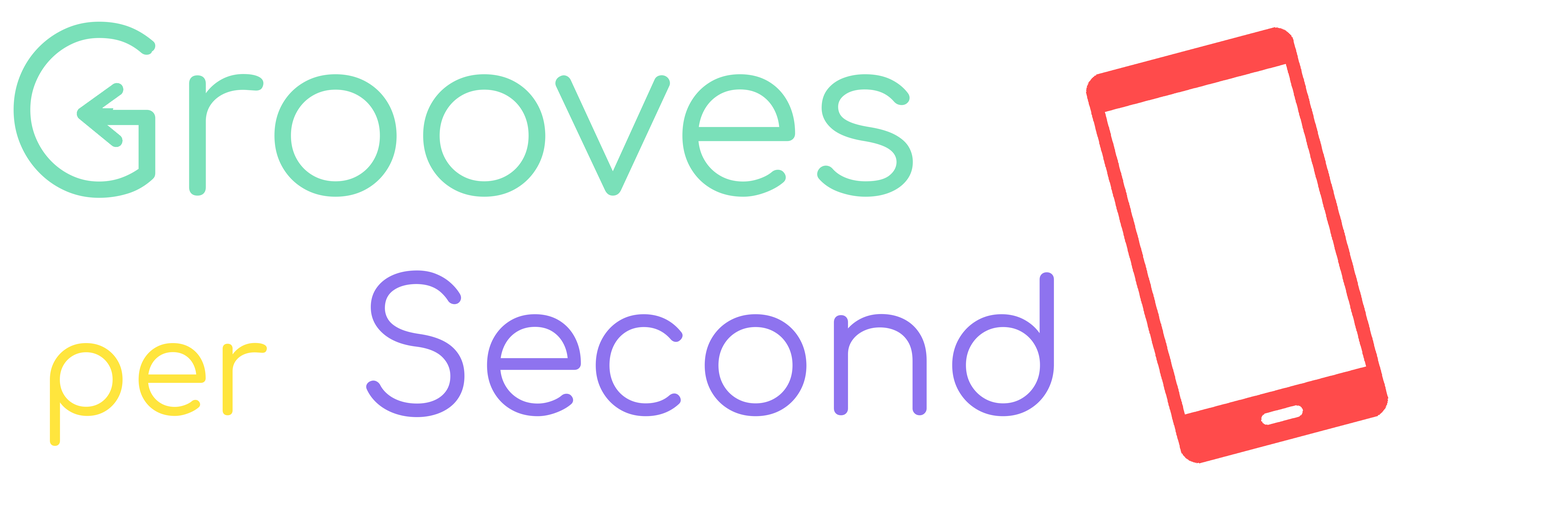
<style>
.page{position:relative;width:1568px;height:523px;background:#ffffff}
.page>*{position:absolute;margin:0}
.t1{font:219.7px "Comfortaa-Regular";color:#7ae0b9}
.t2{font:130.7px "Comfortaa-Regular";color:#ffe53d}
.t3{font:182.9px "Comfortaa-Regular";color:#8e73ef}
</style>
<div class="page">
<p class="t1" style="left:14px;top:22px;width:1040px;height:424px">Grooves<br> <span class="t2">per  </span><span class="t3">Second</span></p>
</div>
